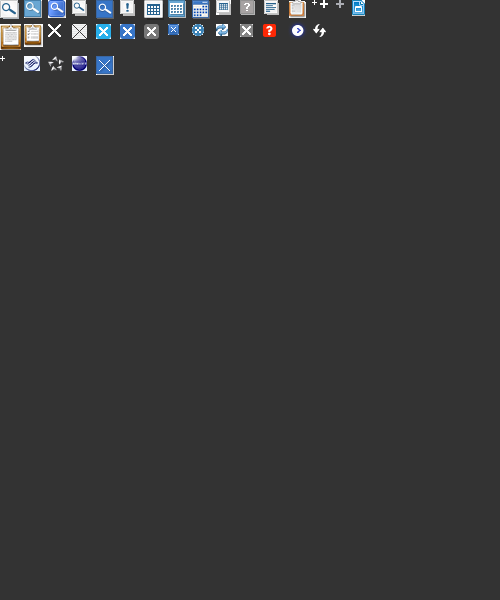
<style>
.page{position:relative;width:500px;height:600px;background:#333333}
.page>*{position:absolute;margin:0}
.t1{font:11px "Dotum";color:#ffffff}
.t2{font:12px "Futura-Bold";color:#ffffff}
</style>
<div class="page">
<p class="t1" style="left:312px;top:0px;width:5px;height:5px">+</p>
<p class="t2" style="left:266px;top:25px;width:7px;height:11px">?</p>
<p class="t1" style="left:0px;top:56px;width:5px;height:5px">+</p>
</div>
